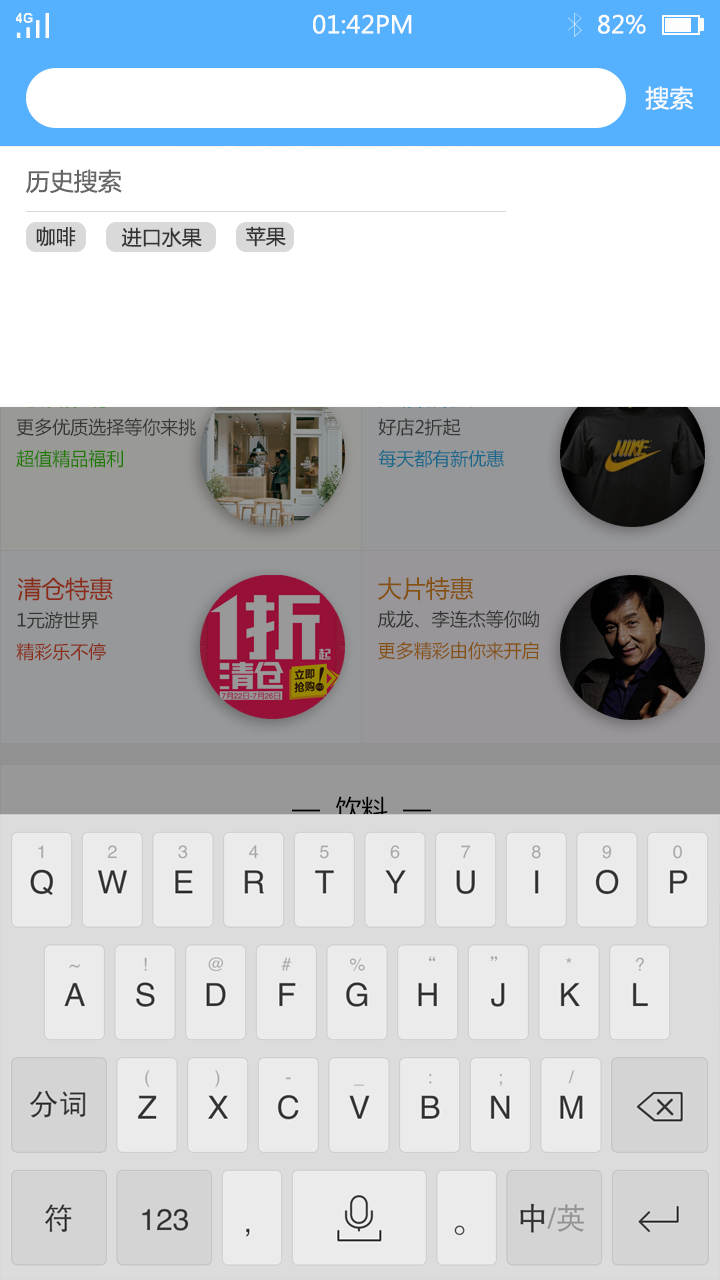
<style>
.page{position:relative;width:720px;height:1280px;background:#ffffff}
.page>*{position:absolute;margin:0}
.t1{font:24px "MicrosoftYaHei";color:#fbfdfc}
.t2{font:24px "MicrosoftYaHei";color:#ffffff}
.t3{font:24px "MicrosoftYaHei";color:#666666}
.t4{font:20px "MicrosoftYaHei";color:#333333}
.t5{font:18px "MicrosoftYaHei"}
.t6{font:24px "MicrosoftYaHei";color:#8a2c17}
.t7{font:24px "MicrosoftYaHei";color:#865214}
.t8{font:26px "MicrosoftYaHei";color:#000000}
</style>
<div class="page">
<p class="t1" style="left:313px;top:14px;width:99px;height:20px">01:42PM</p>
<p class="t1" style="left:598px;top:14px;width:48px;height:20px">82%</p>
<p class="t2" style="left:645px;top:86px;width:49px;height:24px;opacity:0.96">搜索</p>
<p class="t3" style="left:26px;top:169px;width:96px;height:24px">历史搜索</p>
<p class="t4" style="left:36px;top:226px;width:40px;height:21px">咖啡</p>
<p class="t4" style="left:121px;top:227px;width:81px;height:21px">进口水果</p>
<p class="t4" style="left:246px;top:226px;width:40px;height:21px">苹果</p>
<p class="t5" style="left:16px;top:418px;width:180px;height:50px">更多优质选择等你来挑<br>超值精品福利</p>
<p class="t5" style="left:378px;top:418px;width:126px;height:50px">好店2折起<br>每天都有新优惠</p>
<p class="t6" style="left:17px;top:577px;width:96px;height:24px">清仓特惠</p>
<p class="t7" style="left:378px;top:577px;width:96px;height:24px">大片特惠</p>
<p class="t5" style="left:16px;top:611px;width:90px;height:50px">1元游世界<br>精彩乐不停</p>
<p class="t5" style="left:377px;top:610px;width:162px;height:50px">成龙、李连杰等你呦<br>更多精彩由你来开启</p>
<p class="t8" style="left:292px;top:796px;width:139px;height:26px">—  饮料  —</p>
</div>
